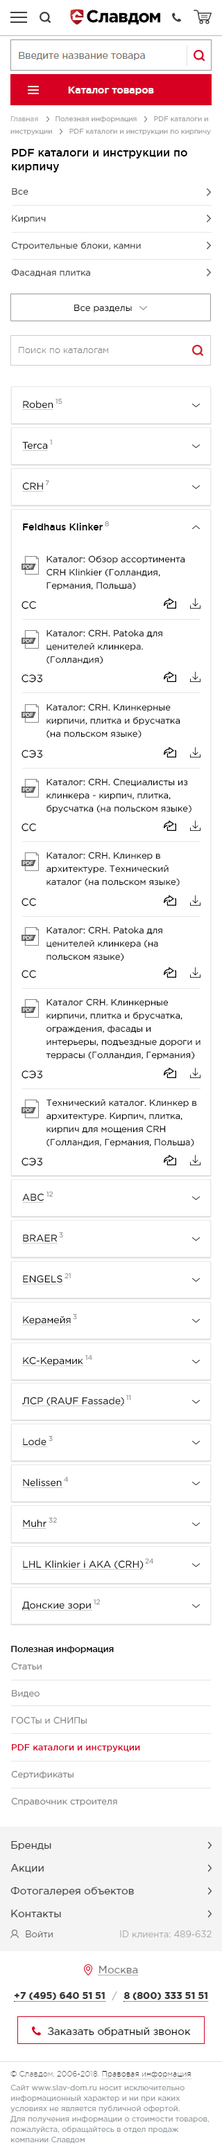
<style>
.page{position:relative;width:222px;height:2152px;background:#ffffff}
.page>*{position:absolute;margin:0}
.t1{font:6.9px/12.5px "GothamPro";color:#9f9f9f}
.t2{font:11.1px/13.8px "GothamPro-Medium";color:#010101}
.t3{font:9px/27px "GothamPro";color:#333333}
.t4{font:9px "GothamPro";color:#000000}
.t5{font:9px "GothamPro-Light";color:#848688}
.t6{font:9.7px "GothamPro";color:#000000}
.t7{font:6.9px "GothamPro"}
.t8{font:9.7px "GothamPro-Medium";color:#000000}
.t9{font:9px/13.2px "GothamPro";color:#000000}
.t10{font:9px/17.7px "GothamPro";color:#000000}
.t11{font:5px "GothamPro";color:#ffffff;text-transform:uppercase}
.t12{font:10.4px "GothamPro";color:#000000}
.t13{font:6.9px "GothamPro";color:#919395}
.t14{font:9px "GothamPro-Medium";letter-spacing:-0.025em;color:#000000}
.t15{font:9px/27px "GothamPro";color:#7c7c7c}
.t16{font:9px/27px "GothamPro-Medium";color:#d70022}
</style>
<div class="page">
<p class="t1" style="left:10px;top:116px;width:200px;height:19px">Главная        Полезная информация        PDF каталоги и <br>инструкции        PDF каталоги и инструкции по кирпичу</p>
<p class="t2" style="left:12px;top:149px;width:175px;height:23px">PDF каталоги и инструкции по <br>кирпичу</p>
<p class="t3" style="left:11px;top:188px;width:130px;height:89px">Все<br>Кирпич<br>Строительные блоки, камни<br>Фасадная плитка</p>
<p class="t4" style="left:74px;top:304px;width:58px;height:9px">Все разделы</p>
<p class="t5" style="left:19px;top:347px;width:89px;height:6px">Поиск по каталогам</p>
<p class="t6" style="left:23px;top:400px;width:30px;height:8px">Roben</p>
<p class="t7" style="left:55px;top:398px;width:7px;height:6px">15</p>
<p class="t6" style="left:22px;top:442px;width:26px;height:7px">Terca</p>
<p class="t7" style="left:50px;top:439px;width:2px;height:6px">1</p>
<p class="t6" style="left:22px;top:482px;width:21px;height:8px">CRH</p>
<p class="t7" style="left:45px;top:480px;width:4px;height:6px">7</p>
<p class="t7" style="left:105px;top:521px;width:4px;height:6px">8</p>
<p class="t8" style="left:23px;top:523px;width:79px;height:7px">Feldhaus Klinker</p>
<p class="t9" style="left:46px;top:555px;width:139px;height:36px"><span class="t10">Каталог: Обзор ассортимента <br></span>CRH Klinkier (Голландия, <br>Германия, Польша)</p>
<p class="t11" style="left:23px;top:564px;width:10px;height:5px">pdf</p>
<p class="t12" style="left:21px;top:601px;width:15px;height:8px">CC</p>
<p class="t9" style="left:46px;top:629px;width:116px;height:35px">Каталог: CRH. Patoka для <br>ценителей клинкера. <br>(Голландия)</p>
<p class="t11" style="left:23px;top:638px;width:10px;height:5px">pdf</p>
<p class="t12" style="left:21px;top:674px;width:22px;height:9px">СЭ3</p>
<p class="t11" style="left:23px;top:712px;width:10px;height:5px">pdf</p>
<p class="t9" style="left:46px;top:703px;width:134px;height:35px">Каталог: CRH. Клинкерные <br>кирпичи, плитка и брусчатка <br>(на польском языке)</p>
<p class="t12" style="left:21px;top:750px;width:22px;height:8px">СЭ3</p>
<p class="t9" style="left:46px;top:778px;width:145px;height:35px">Каталог: CRH. Специалисты из <br>клинкера - кирпич, плитка, <br>брусчатка (на польском языке)</p>
<p class="t11" style="left:23px;top:787px;width:10px;height:5px">pdf</p>
<p class="t12" style="left:21px;top:823px;width:15px;height:8px">CC</p>
<p class="t9" style="left:46px;top:852px;width:133px;height:34px">Каталог: CRH. Клинкер в <br>архитектуре. Технический <br>каталог (на польском языке)</p>
<p class="t11" style="left:23px;top:861px;width:10px;height:4px">pdf</p>
<p class="t12" style="left:21px;top:898px;width:15px;height:8px">CC</p>
<p class="t9" style="left:46px;top:926px;width:116px;height:35px">Каталог: CRH. Patoka для <br>ценителей клинкера (на <br>польском языке)</p>
<p class="t11" style="left:23px;top:935px;width:10px;height:5px">pdf</p>
<p class="t12" style="left:21px;top:970px;width:15px;height:8px">CC</p>
<p class="t9" style="left:46px;top:998px;width:154px;height:62px">Каталог CRH. Клинкерные <br>кирпичи, плитка и брусчатка, <br>ограждения, фасады и <br>интерьеры, подъездные дороги и <br>террасы (Голландия, Германия)</p>
<p class="t11" style="left:23px;top:1007px;width:10px;height:5px">pdf</p>
<p class="t12" style="left:21px;top:1070px;width:22px;height:9px">СЭ3</p>
<p class="t11" style="left:23px;top:1108px;width:10px;height:5px">pdf</p>
<p class="t9" style="left:46px;top:1099px;width:151px;height:48px">Технический каталог. Клинкер в <br>архитектуре. Кирпич, плитка, <br>кирпич для мощения CRH <br>(Голландия, Германия, Польша)</p>
<p class="t12" style="left:21px;top:1158px;width:22px;height:8px">СЭ3</p>
<p class="t6" style="left:22px;top:1193px;width:22px;height:8px">ABC</p>
<p class="t7" style="left:46px;top:1191px;width:7px;height:6px">12</p>
<p class="t6" style="left:23px;top:1234px;width:34px;height:8px">BRAER</p>
<p class="t7" style="left:59px;top:1232px;width:4px;height:6px">3</p>
<p class="t6" style="left:23px;top:1275px;width:39px;height:8px">ENGELS</p>
<p class="t7" style="left:64px;top:1272px;width:7px;height:7px">21</p>
<p class="t7" style="left:73px;top:1313px;width:4px;height:7px">3</p>
<p class="t6" style="left:23px;top:1315px;width:48px;height:10px">Керамейя</p>
<p class="t6" style="left:23px;top:1356px;width:60px;height:10px">КС-Керамик</p>
<p class="t7" style="left:85px;top:1354px;width:7px;height:6px">14</p>
<p class="t6" style="left:21px;top:1396px;width:103px;height:9px">ЛСР (RAUF Fassade)</p>
<p class="t7" style="left:126px;top:1394px;width:5px;height:7px">11</p>
<p class="t6" style="left:23px;top:1437px;width:23px;height:9px">Lode</p>
<p class="t7" style="left:48px;top:1435px;width:5px;height:6px">3</p>
<p class="t6" style="left:23px;top:1478px;width:39px;height:8px">Nelissen</p>
<p class="t7" style="left:64px;top:1476px;width:5px;height:6px">4</p>
<p class="t13" style="left:48px;top:1517px;width:9px;height:6px">32</p>
<p class="t6" style="left:23px;top:1519px;width:23px;height:8px">Muhr</p>
<p class="t6" style="left:23px;top:1560px;width:120px;height:9px">LHL Klinkier i AKA (CRH)</p>
<p class="t7" style="left:145px;top:1558px;width:8px;height:6px">24</p>
<p class="t6" style="left:22px;top:1601px;width:69px;height:9px">Донские зори</p>
<p class="t7" style="left:93px;top:1599px;width:7px;height:6px">12</p>
<p class="t14" style="left:11px;top:1646px;width:103px;height:7px">Полезная информация</p>
<p class="t15" style="left:11px;top:1662px;width:129px;height:144px">Статьи                           <br>Видео                            <br>ГОСТы и СНИПы                            <br><span class="t16">PDF каталоги и инструкции</span>                            <br>Сертификаты                           <br>Справочник строителя</p>
</div>
